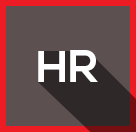
<style>
.page{position:relative;width:136px;height:132px;background:#5d5050}
.page>*{position:absolute;margin:0}
.t1{font:44.4px "NexaBold";color:#ffffff}
</style>
<div class="page">
<p class="t1" style="left:38px;top:50px;width:60px;height:32px">HR</p>
</div>
